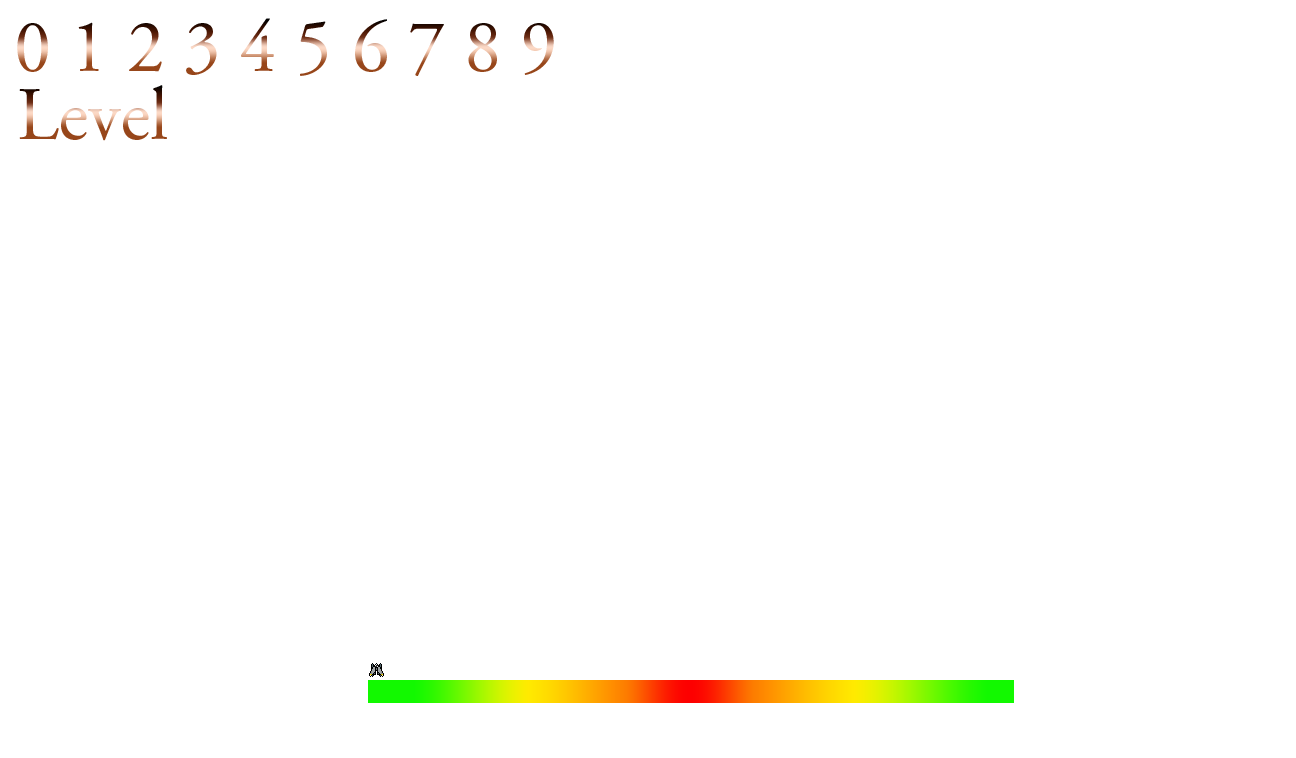
<style>
.page{position:relative;width:1296px;height:758px;background:#ffffff}
.page>*{position:absolute;margin:0}
.t1{font:75px "AGaramondPro-Regular"}
</style>
<div class="page">
<p class="t1" style="left:17px;top:18px;width:537px;height:58px">0 1 2 3 4 5 6 7 8 9</p>
<p class="t1" style="left:19px;top:85px;width:148px;height:56px">Level</p>
</div>
